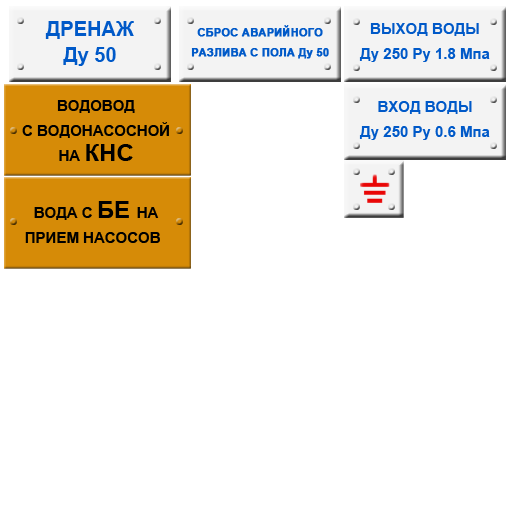
<style>
.page{position:relative;width:512px;height:512px;background:#ffffff}
.page>*{position:absolute;margin:0}
.t1{font:20px/26px "Arial-BoldMT";color:#0059c8}
.t2{font:11px/20px "Arial-BoldMT";color:#0059c8;font-weight:bold}
.t3{font:15px/25px "Arial-BoldMT";color:#0059c8}
.t4{font:15px/25px "Arial-BoldMT";color:#000000}
.t5{font:24px/25px "Arial-BoldMT";color:#000000}
</style>
<div class="page">
<p class="t1" style="left:45px;top:21px;width:89px;height:45px;text-align:center">ДРЕНАЖ<br>Ду 50</p>
<p class="t2" style="left:191px;top:25px;width:138px;height:34px;text-align:center">СБРОС АВАРИЙНОГО<br>РАЗЛИВА С ПОЛА Ду 50</p>
<p class="t3" style="left:359px;top:23px;width:131px;height:39px;text-align:center">ВЫХОД ВОДЫ<br>Ду 250 Ру 1.8 Мпа</p>
<p class="t4" style="left:22px;top:100px;width:147px;height:61px;text-align:center">ВОДОВОД<br>С ВОДОНАСОСНОЙ<br>НА <span class="t5">КНС</span></p>
<p class="t3" style="left:359px;top:101px;width:131px;height:39px;text-align:center">ВХОД ВОДЫ<br>Ду 250 Ру 0.6 Мпа</p>
<p class="t4" style="left:25px;top:201px;width:135px;height:42px;text-align:center">ВОДА С <span class="t5">БЕ </span>НА<br>ПРИЕМ НАСОСОВ</p>
</div>
